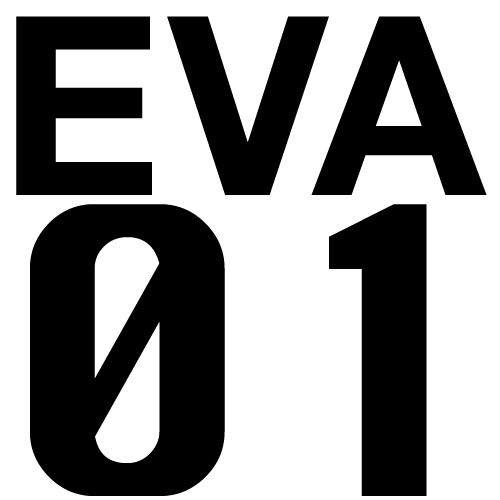
<style>
.page{position:relative;width:500px;height:500px;background:#ffffff}
.page>*{position:absolute;margin:0}
.t1{font:250px "HelveticaNeueBold";color:#000000}
.t2{font:388.9px "Chicago";color:#000000}
</style>
<div class="page">
<p class="t1" style="left:16px;top:16px;width:136px;height:179px">E</p>
<p class="t1" style="left:167px;top:16px;width:162px;height:179px">V</p>
<p class="t1" style="left:311px;top:16px;width:176px;height:179px">A</p>
<p class="t2" style="left:30px;top:204px;width:195px;height:292px">0</p>
<p class="t2" style="left:329px;top:204px;width:98px;height:292px">1</p>
</div>
